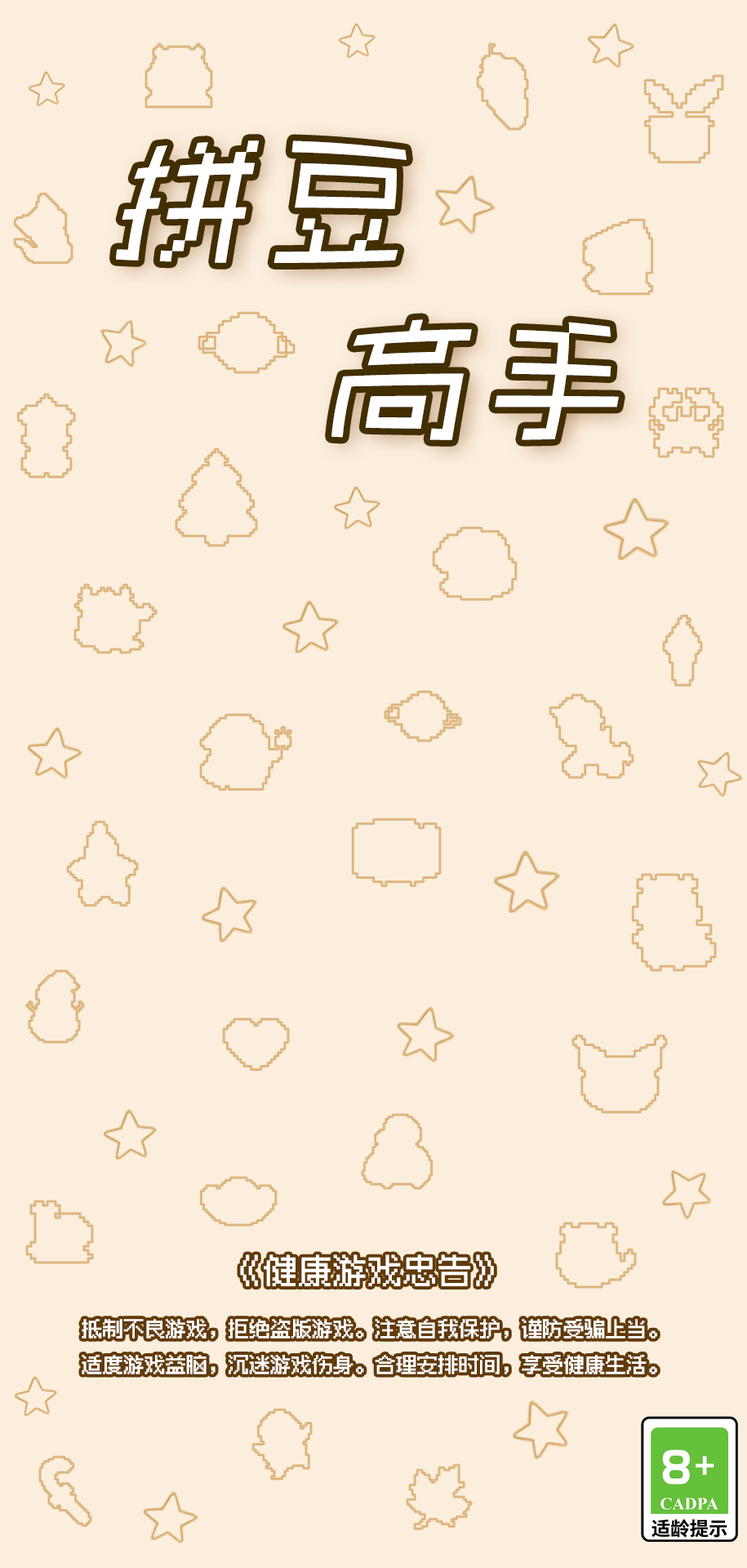
<style>
.page{position:relative;width:747px;height:1568px;background:#fceedd}
.page>*{position:absolute;margin:0}
.t1{font:119.1px "pixel_font-Regular";letter-spacing:0.2em;color:#ffffff;font-style:italic}
.t2{font:34px "pixel_font-Regular";color:#ffffff;font-weight:bold}
.t3{font:20.4px "pixel_font-Regular";color:#ffffff;font-weight:bold}
</style>
<div class="page">
<p class="t1" style="left:116px;top:140px;width:291px;height:123px">拼豆</p>
<p class="t1" style="left:332px;top:319px;width:287px;height:121px">高手</p>
<p class="t2" style="left:240px;top:1254px;width:254px;height:32px">《健康游戏忠告》</p>
<p class="t3" style="left:82px;top:1319px;width:575px;height:55px;text-align:center">抵制不良游戏，拒绝盗版游戏。注意自我保护，谨防受骗上当。<br>适度游戏益脑，沉迷游戏伤身。合理安排时间，享受健康生活。</p>
</div>
